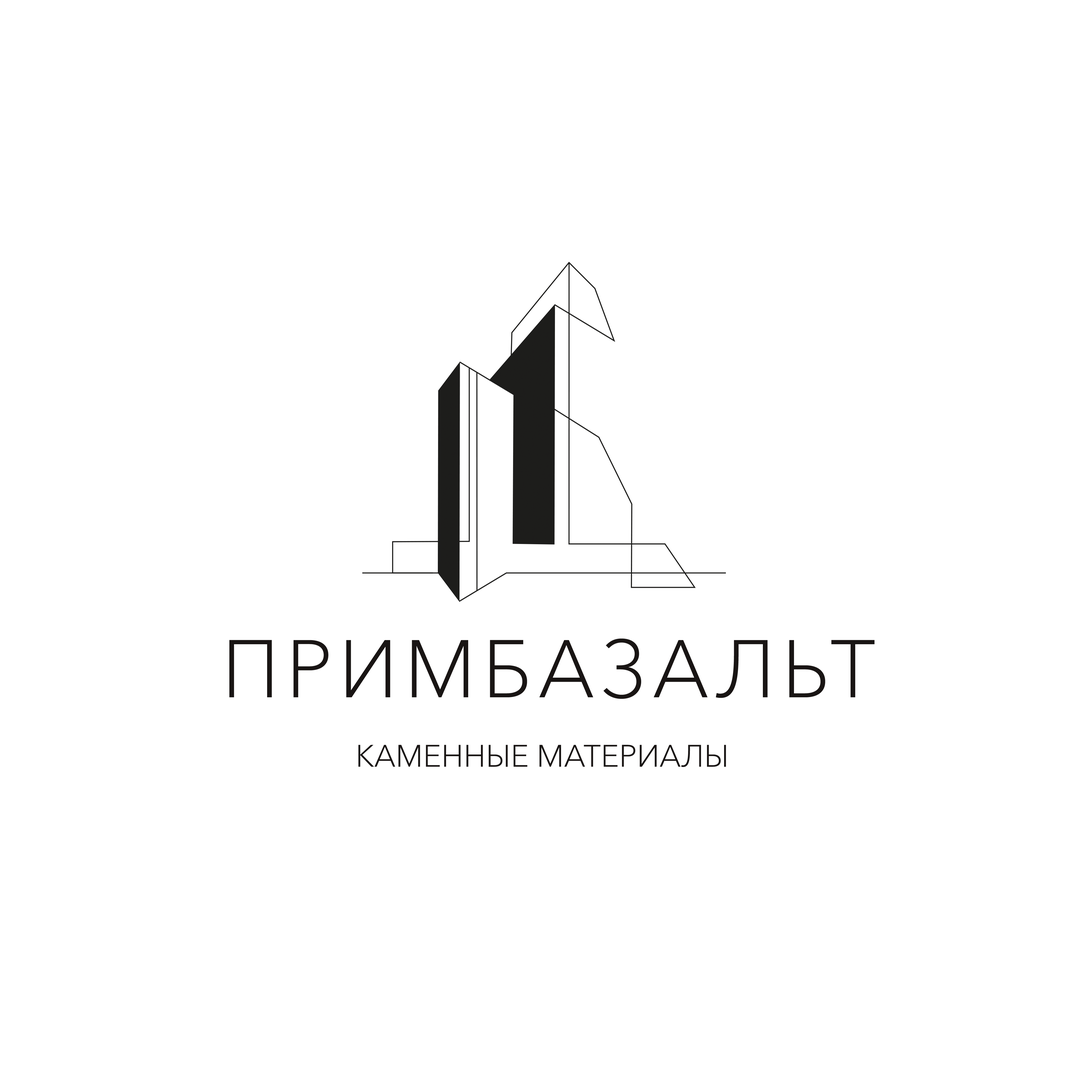
<style>
.page{position:relative;width:1092px;height:1092px;background:#ffffff}
.page>*{position:absolute;margin:0}
.t1{font:80.8px "AvenirNextW1G-Light";letter-spacing:0.075em;color:#191514}
.t2{font:30.8px "AvenirNextW1G-Light";color:#191514}
</style>
<div class="page">
<p class="t1" style="left:229px;top:638px;width:646px;height:61px">ПРИМБАЗАЛЬТ</p>
<p class="t2" style="left:358px;top:745px;width:368px;height:22px">КАМЕННЫЕ МАТЕРИАЛЫ</p>
</div>
